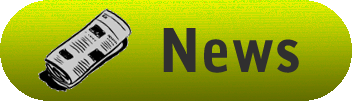
<style>
.page{position:relative;width:352px;height:101px}
.page>*{position:absolute;margin:0}
.t1{font:60px "BellGothicStd-Black";color:#302f2f}
</style>
<div class="page">
<p class="t1" style="left:163px;top:28px;width:136px;height:45px">News</p>
</div>
